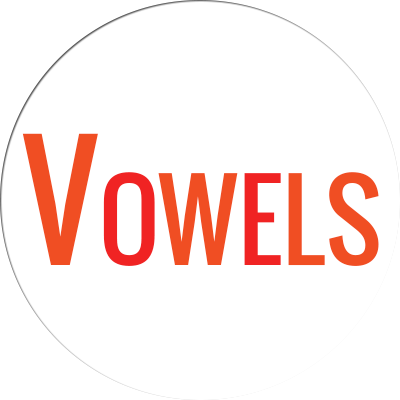
<style>
.page{position:relative;width:400px;height:400px;background:#ffffff}
.page>*{position:absolute;margin:0}
.t1{font:150px "Oswald";color:#f04e23;font-variant:small-caps}
.t2{font:150px "Oswald";color:#f02323;font-variant:small-caps}
</style>
<div class="page">
<p class="t1" style="left:22px;top:133px;width:357px;height:133px">V<span class="t2">o</span>w<span class="t2">e</span>ls</p>
</div>
